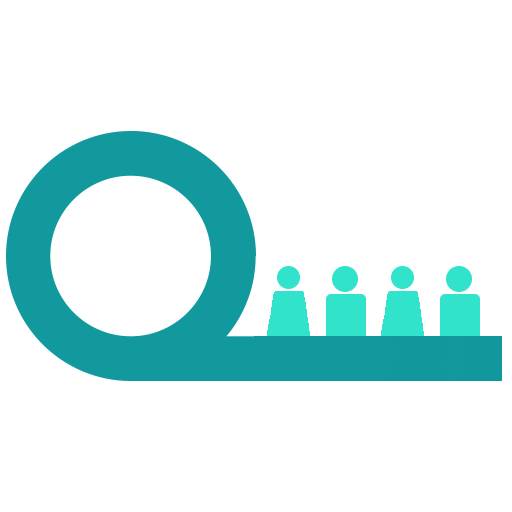
<style>
.page{position:relative;width:512px;height:512px;background:#ffffff}
.page>*{position:absolute;margin:0}
.t1{font:357.5px "AzonixRegular";color:#11999e}
</style>
<div class="page">
<p class="t1" style="left:6px;top:130px;width:250px;height:251px">Q</p>
</div>
